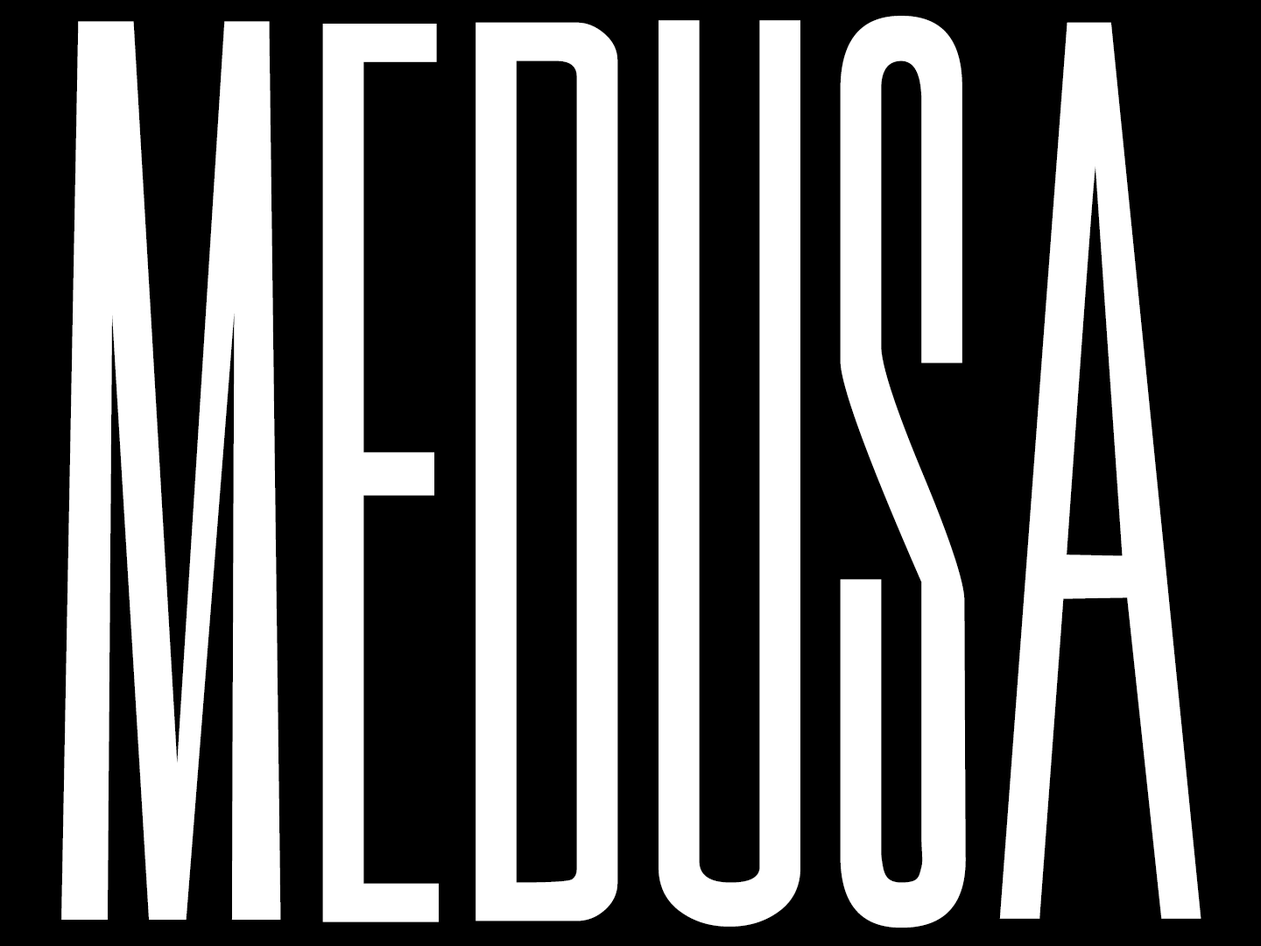
<style>
.page{position:relative;width:1261px;height:946px;background:#000000}
.page>*{position:absolute;margin:0}
.t1{font:1122.4px "TallSkinnyCondensed";color:#ffffff}
</style>
<div class="page">
<p class="t1" style="left:61px;top:16px;width:1140px;height:911px">MEDUSA</p>
</div>
